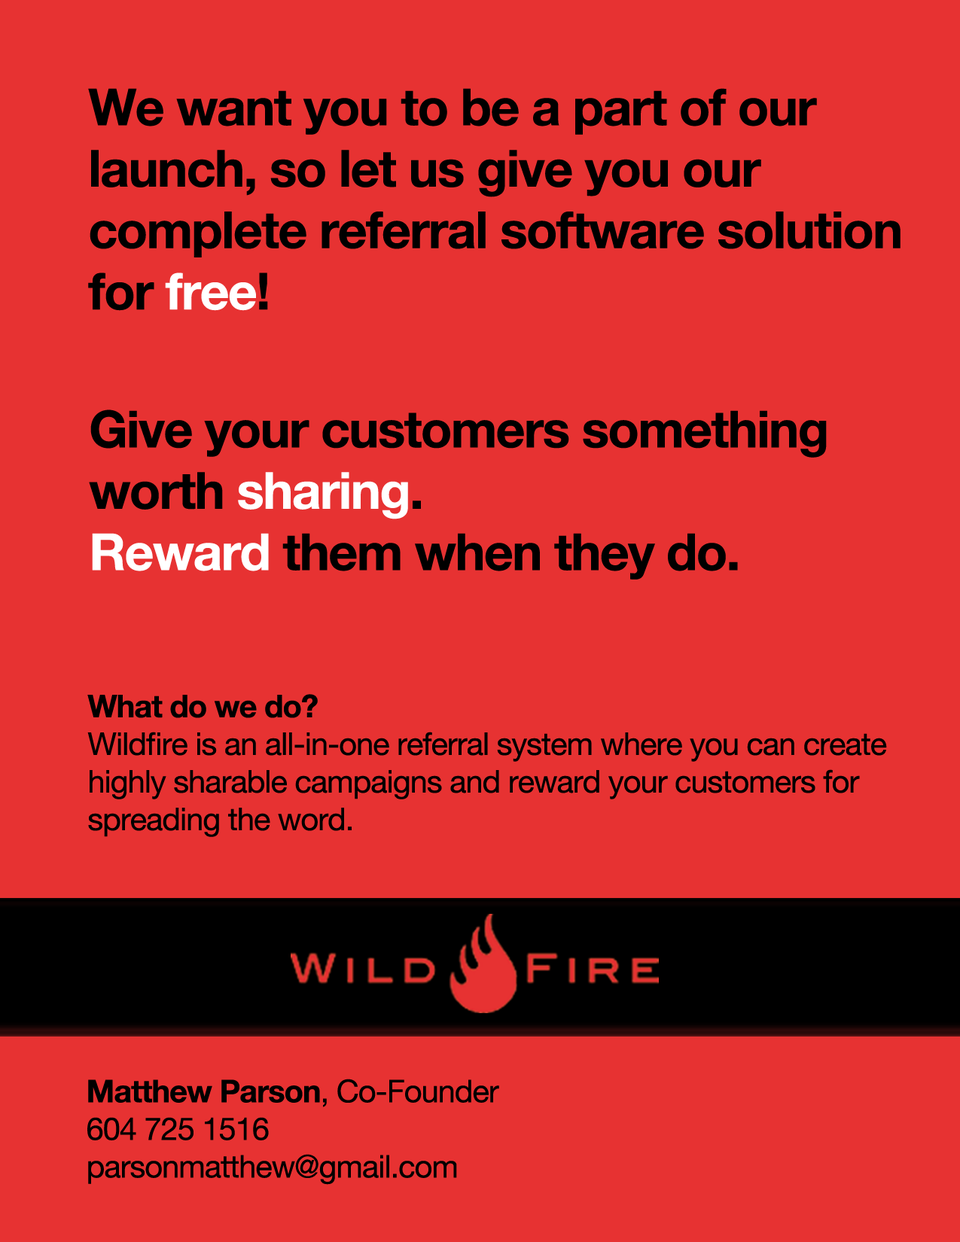
<style>
.page{position:relative;width:960px;height:1242px;background:#e73232}
.page>*{position:absolute;margin:0}
.t1{font:51.2px "HelveticaNeue-Bold";letter-spacing:-0.025em;color:#000000}
.t2{font:51.2px "HelveticaNeue-Bold";letter-spacing:-0.025em;color:#ffffff}
.t3{font:31.4px "HelveticaNeue";letter-spacing:-0.025em;color:#000000}
.t4{font:31.4px "HelveticaNeue-Bold";letter-spacing:-0.025em;color:#000000}
</style>
<div class="page">
<p class="t1" style="left:88px;top:88px;width:812px;height:223px">We want you to be a part of our<br>launch, so let us give you our <br>complete referral software solution <br>for <span class="t2">free</span>!</p>
<p class="t1" style="left:89px;top:410px;width:738px;height:170px">Give your customers something <br>worth <span class="t2">sharing</span>. <br><span class="t2">Reward</span> them when they do.</p>
<p class="t3" style="left:87px;top:694px;width:800px;height:143px"><span class="t4">What do we do?</span> <br>Wildfire is an all-in-one referral system where you can create <br>highly sharable campaigns and reward your customers for <br>spreading the word.</p>
<p class="t3" style="left:87px;top:1079px;width:412px;height:106px"><span class="t4">Matthew Parson</span>, Co-Founder <br>604 725 1516<br>parsonmatthew@gmail.com</p>
</div>
